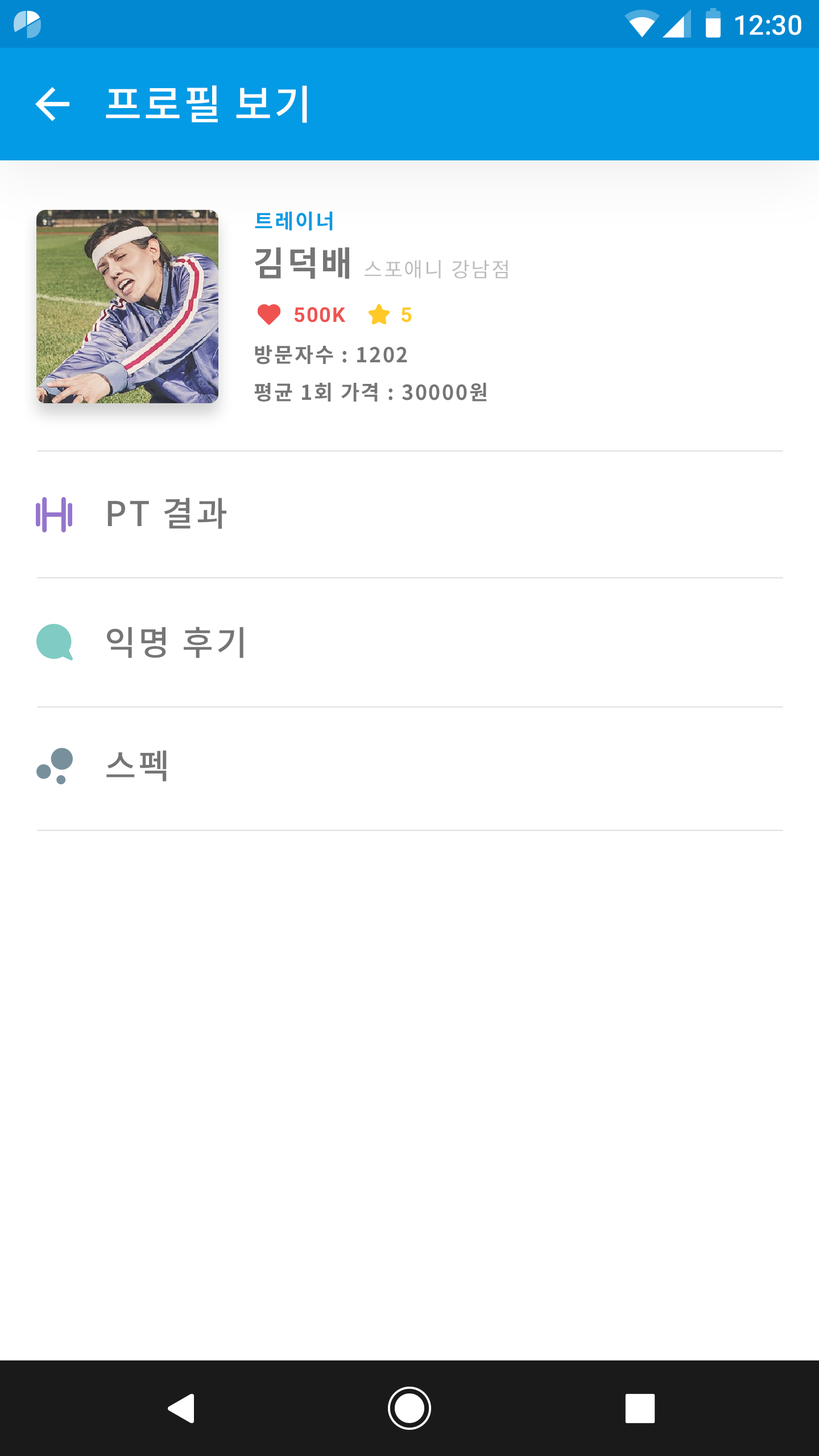
<style>
.page{position:relative;width:819px;height:1456px;background:#ffffff}
.page>*{position:absolute;margin:0}
.t1{font:27.3px "Roboto-Medium";color:#ffffff}
.t2{font:40.9px "NotoSansCJKkr-Medium";letter-spacing:0.05em;color:#ffffff}
.t3{font:20.5px "NotoSansCJKkr-Bold";letter-spacing:0.072em;color:#039be5}
.t4{font:34.1px "NotoSansCJKkr-Bold";letter-spacing:0.072em;color:#757575}
.t5{font:20.5px "NotoSansCJKkr-Regular";letter-spacing:0.072em;color:#bdbdbd}
.t6{font:20.5px "Roboto-Bold";letter-spacing:0.05em;color:#ef5350}
.t7{font:20.5px "Roboto-Bold";letter-spacing:0.05em;color:#ffca28}
.t8{font:20.5px "NotoSansCJKkr-Bold";letter-spacing:0.072em;color:#757575}
.t9{font:34.1px "NotoSansCJKkr-Medium";letter-spacing:0.072em;color:#757575}
</style>
<div class="page">
<p class="t1" style="left:735px;top:15px;width:66px;height:20px">12:30</p>
<p class="t2" style="left:106px;top:85px;width:201px;height:38px">프로필 보기</p>
<p class="t3" style="left:255px;top:212px;width:78px;height:19px">트레이너</p>
<p class="t4" style="left:255px;top:247px;width:94px;height:32px">김덕배</p>
<p class="t5" style="left:365px;top:260px;width:143px;height:19px">스포애니 강남점</p>
<p class="t6" style="left:294px;top:307px;width:51px;height:15px">500K</p>
<p class="t7" style="left:401px;top:307px;width:11px;height:15px">5</p>
<p class="t8" style="left:255px;top:345px;width:152px;height:20px">방문자수 : 1202</p>
<p class="t8" style="left:254px;top:382px;width:233px;height:20px">평균 1회 가격 : 30000원</p>
<p class="t9" style="left:107px;top:498px;width:119px;height:31px">PT 결과</p>
<p class="t9" style="left:107px;top:627px;width:136px;height:31px">익명 후기</p>
<p class="t9" style="left:106px;top:750px;width:61px;height:31px">스펙</p>
</div>
